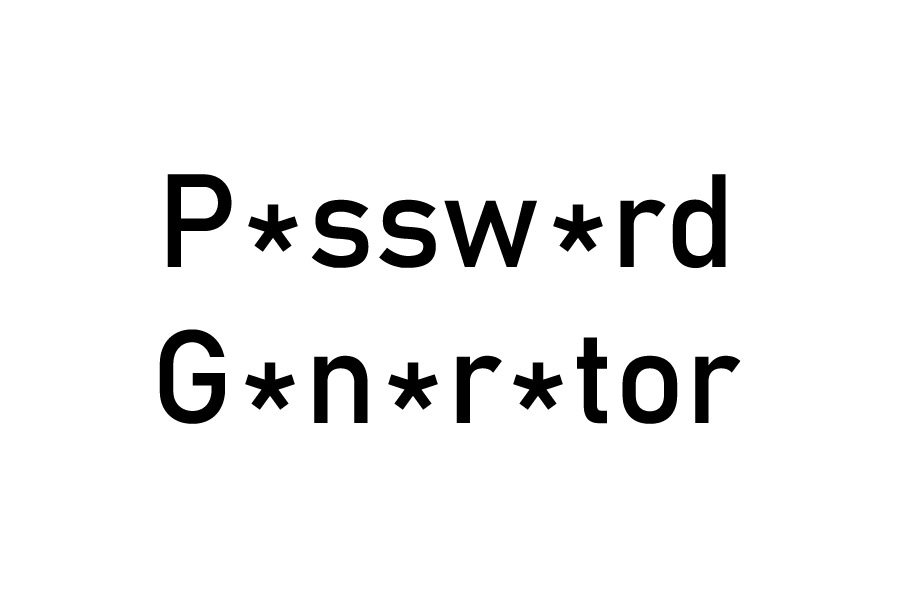
<style>
.page{position:relative;width:900px;height:598px;background:#ffffff}
.page>*{position:absolute;margin:0}
.t1{font:130px "Bahnschrift";color:#000000}
</style>
<div class="page">
<p class="t1" style="left:159px;top:174px;width:582px;height:250px;text-align:center">P  ssw  rd<br>G  n  r  tor</p>
<p class="t1" style="left:248px;top:204px;width:50px;height:48px">*</p>
<p class="t1" style="left:553px;top:204px;width:50px;height:48px">*</p>
<p class="t1" style="left:245px;top:362px;width:50px;height:48px">*</p>
<p class="t1" style="left:388px;top:362px;width:50px;height:48px">*</p>
<p class="t1" style="left:513px;top:362px;width:50px;height:48px">*</p>
</div>
